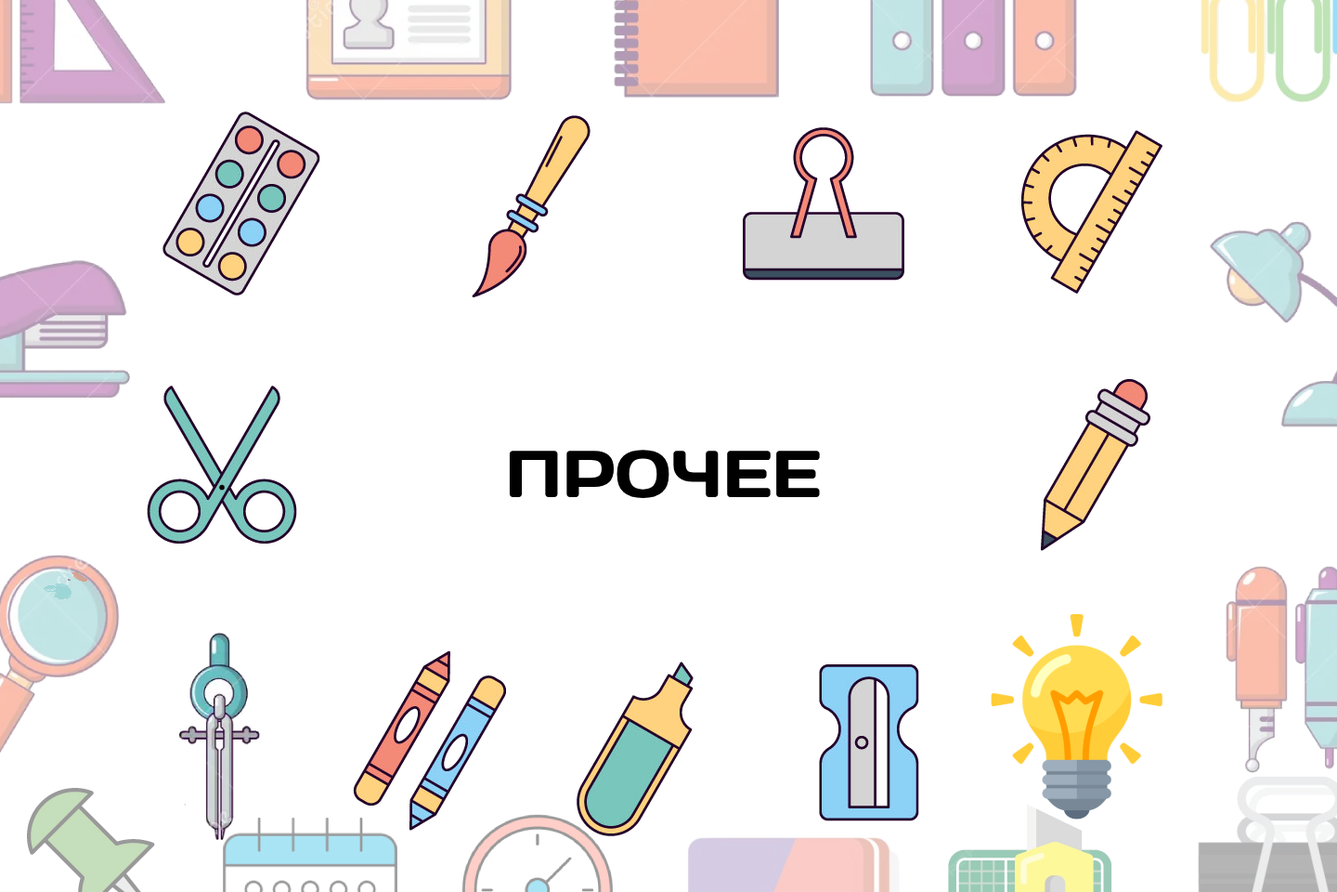
<style>
.page{position:relative;width:1337px;height:892px;background:#ffffff}
.page>*{position:absolute;margin:0}
.t1{font:65.9px "DaysOne-Regular";color:#000000}
.t2{font:65.9px "DaysOne-Regular";color:#450d29}
</style>
<div class="page">
<p class="t1" style="left:509px;top:450px;width:311px;height:49px"><span class="t2">П</span>РОЧЕЕ</p>
</div>
